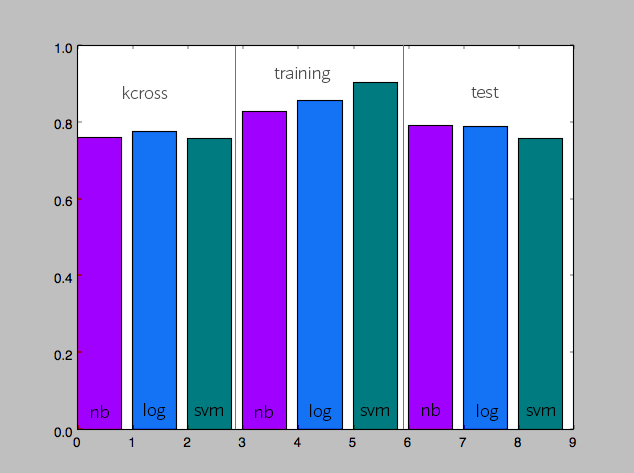
<style>
.page{position:relative;width:634px;height:473px;background:#bfbfbf}
.page>*{position:absolute;margin:0}
.t1{font:18px "Sonus-ExtraLight";color:#504d4d}
.t2{font:18px "Sonus-ExtraLight";color:#000000}
</style>
<div class="page">
<p class="t1" style="left:274px;top:67px;width:57px;height:16px">training</p>
<p class="t1" style="left:123px;top:86px;width:45px;height:13px">kcross</p>
<p class="t1" style="left:471px;top:87px;width:28px;height:11px">test</p>
<p class="t2" style="left:91px;top:405px;width:18px;height:13px">nb</p>
<p class="t2" style="left:144px;top:403px;width:22px;height:17px">log</p>
<p class="t2" style="left:194px;top:407px;width:29px;height:9px">svm</p>
<p class="t2" style="left:255px;top:405px;width:18px;height:13px">nb</p>
<p class="t2" style="left:310px;top:404px;width:22px;height:17px">log</p>
<p class="t2" style="left:360px;top:407px;width:29px;height:9px">svm</p>
<p class="t2" style="left:422px;top:403px;width:18px;height:13px">nb</p>
<p class="t2" style="left:477px;top:404px;width:22px;height:17px">log</p>
<p class="t2" style="left:526px;top:407px;width:29px;height:9px">svm</p>
</div>
